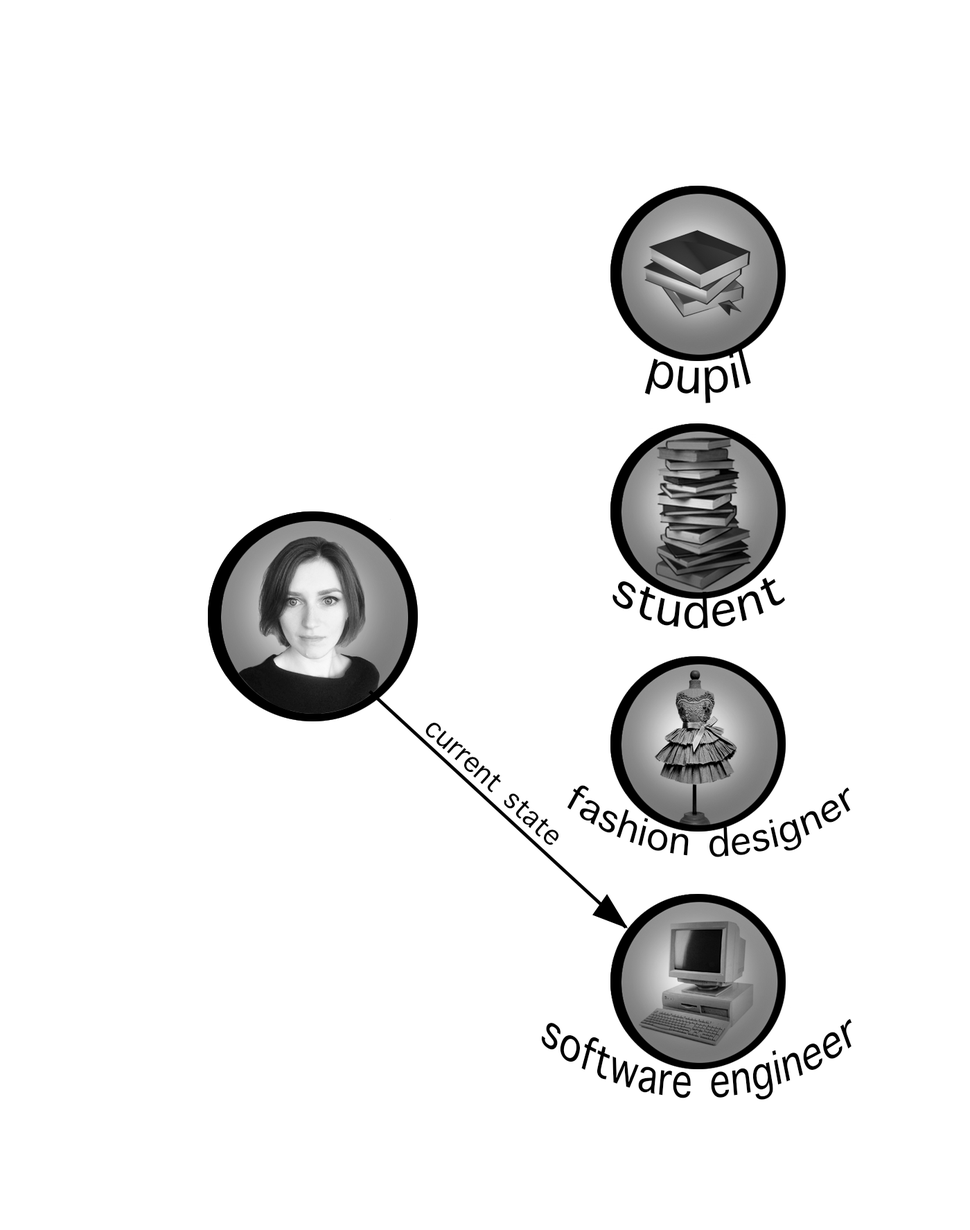
<style>
.page{position:relative;width:970px;height:1230px;background:#ffffff}
.page>*{position:absolute;margin:0}
.t1{font:65.8px "AppleSymbols";color:#000000;scale:0.79 1}
.t2{font:64.6px "AppleSymbols";color:#000000;scale:0.8 1}
.t3{font:37.8px "AppleSymbols";color:#000000}
.t4{font:52px "AppleSymbols";color:#000000;scale:0.86 1}
.t5{font:63.5px "AppleSymbols";color:#000000;scale:0.72 1}
</style>
<div class="page">
<p class="t1" style="left:644px;top:348px;width:107px;height:55px">pupil</p>
<p class="t2" style="left:612px;top:577px;width:174px;height:52px">student</p>
<p class="t3" style="left:425px;top:723px;width:134px;height:121px;rotate:42deg">current state</p>
<p class="t4" style="left:567px;top:785px;width:284px;height:72px">fashion designer</p>
<p class="t5" style="left:541px;top:1018px;width:311px;height:81px">software engineer</p>
</div>
